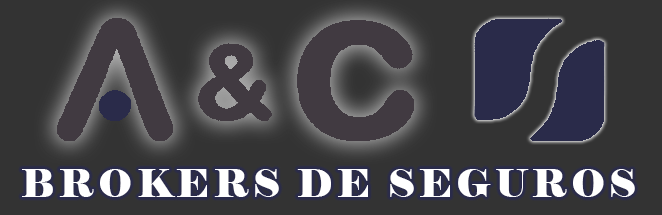
<style>
.page{position:relative;width:662px;height:215px;background:#333333}
.page>*{position:absolute;margin:0}
.t1{font:38.5px "Elephant-Regular";letter-spacing:0.1em;color:#ffffff}
</style>
<div class="page">
<p class="t1" style="left:22px;top:169px;width:613px;height:28px">BROKERS DE SEGUROS</p>
</div>
